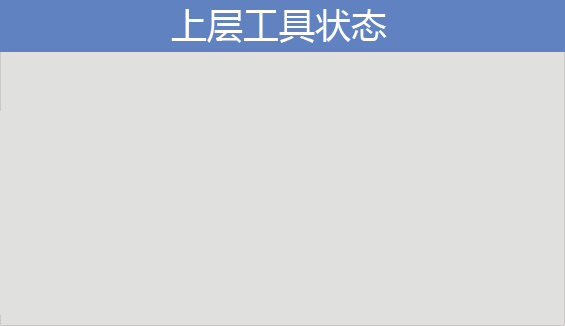
<style>
.page{position:relative;width:565px;height:326px;background:#e0e0df}
.page>*{position:absolute;margin:0}
.t1{font:36px "MicrosoftYaHei";color:#ffffff}
</style>
<div class="page">
<p class="t1" style="left:171px;top:9px;width:216px;height:34px">上层工具状态</p>
</div>
